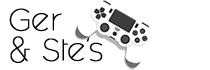
<style>
.page{position:relative;width:210px;height:70px;background:#ffffff}
.page>*{position:absolute;margin:0}
.t1{font:25.2px "FashionFetishLight";color:#000000;font-weight:bold}
</style>
<div class="page">
<p class="t1" style="left:9px;top:8px;width:94px;height:55px">Ger <br>&amp; Ste’s</p>
</div>
